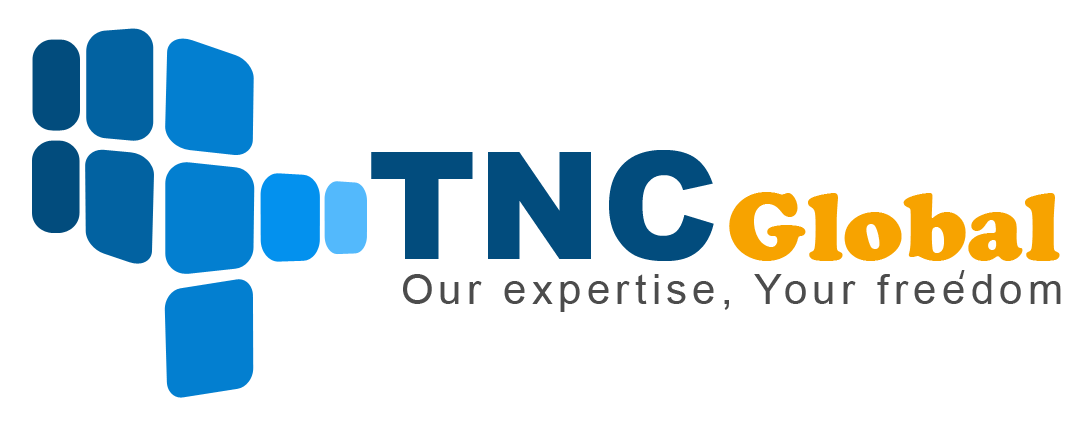
<style>
.page{position:relative;width:1081px;height:435px;background:#ffffff}
.page>*{position:absolute;margin:0}
.t1{font:150px "Arial-Black";color:#024c7d}
.t2{font:100px "CooperBlack";color:#f7a300}
.t3{font:41.7px "Ebrima";letter-spacing:0.16em;color:#4c4c4c}
.t4{font:41.7px "ArialMT";letter-spacing:0.13em;color:#4c4c4c}
</style>
<div class="page">
<p class="t1" style="left:371px;top:150px;width:343px;height:111px">TNC</p>
<p class="t2" style="left:729px;top:192px;width:331px;height:69px">Global</p>
<p class="t3" style="left:959px;top:270px;width:6px;height:9px">‘</p>
<p class="t4" style="left:403px;top:274px;width:658px;height:38px">Our expertise, Your freedom</p>
</div>
